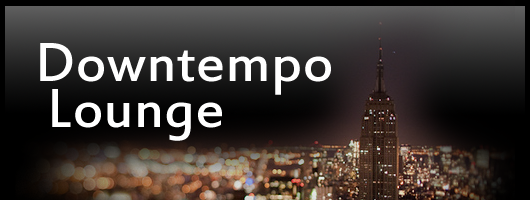
<style>
.page{position:relative;width:530px;height:200px}
.page>*{position:absolute;margin:0}
.t1{font:60px "EstrangeloEdessa";color:#ffffff}
</style>
<div class="page">
<p class="t1" style="left:40px;top:43px;width:291px;height:52px">Downtempo</p>
<p class="t1" style="left:52px;top:89px;width:170px;height:52px">Lounge</p>
</div>
